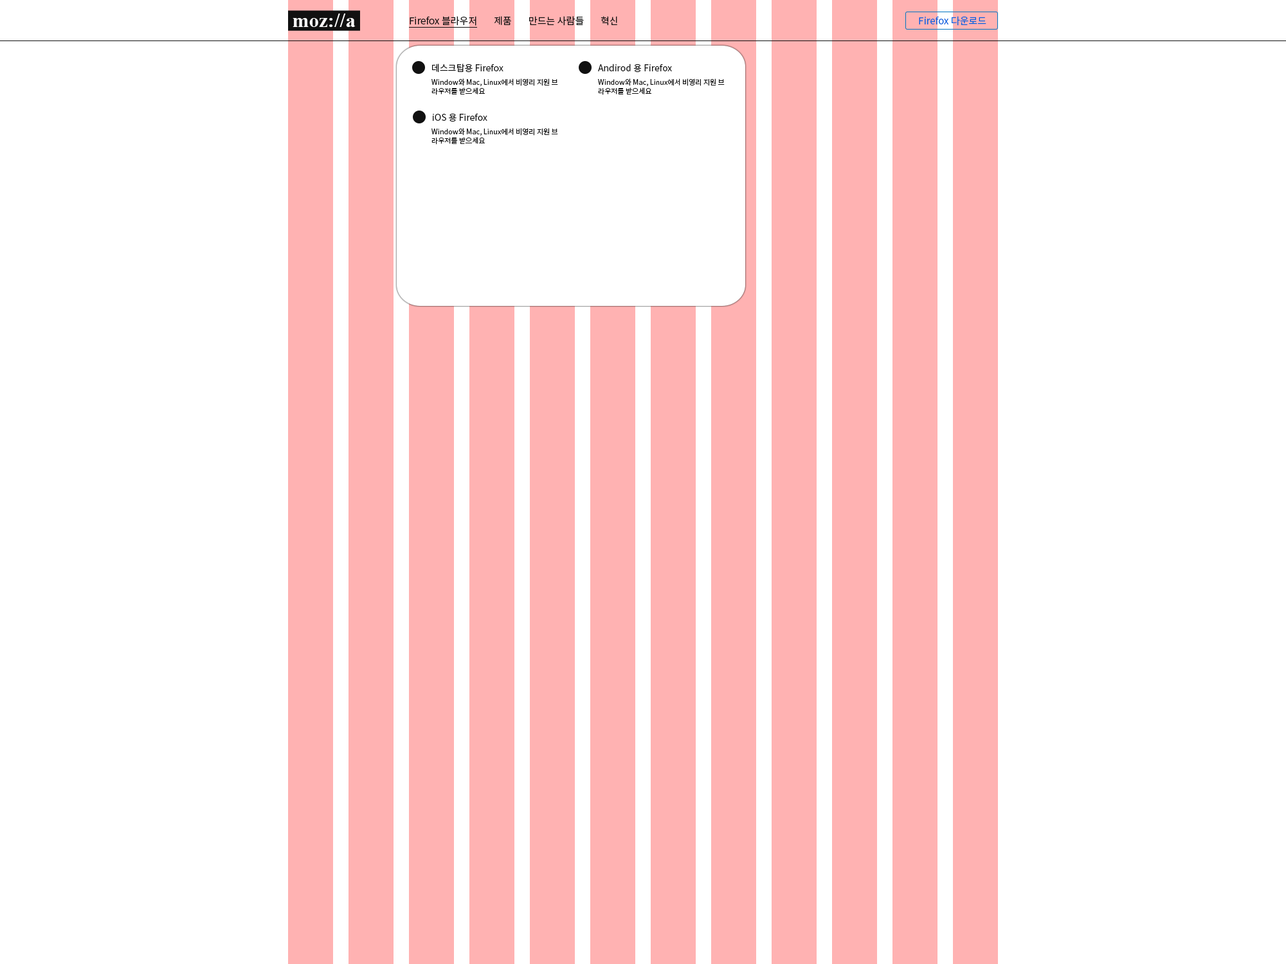
<style>
.page{position:relative;width:1286px;height:964px;background:#ffffff}
.page>*{position:absolute;margin:0}
.t1{font:9.6px "NotoSansKR-Regular";color:#111111}
.t2{font:9.6px "NotoSansKR-Regular";color:#0060df}
.t3{font:9px "NotoSansKR-Regular";color:#111111}
.t4{font:7.1px/9px "NotoSansKR-Regular";color:#111111}
</style>
<div class="page">
<p class="t1" style="left:410px;top:16px;width:66px;height:10px">Firefox 블라우저</p>
<p class="t1" style="left:494px;top:16px;width:17px;height:9px">제품</p>
<p class="t1" style="left:529px;top:16px;width:55px;height:10px">만드는 사람들</p>
<p class="t1" style="left:600px;top:16px;width:17px;height:10px">혁신</p>
<p class="t2" style="left:919px;top:16px;width:67px;height:10px">Firefox 다운로드</p>
<p class="t3" style="left:432px;top:64px;width:71px;height:9px">데스크탑용 Firefox</p>
<p class="t3" style="left:598px;top:64px;width:74px;height:9px">Andirod 용 Firefox</p>
<p class="t4" style="left:431px;top:78px;width:127px;height:17px">Window와 Mac, Linux에서 비영리 지원 브<br>라우저를 받으세요</p>
<p class="t4" style="left:598px;top:78px;width:126px;height:17px">Window와 Mac, Linux에서 비영리 지원 브<br>라우저를 받으세요</p>
<p class="t3" style="left:433px;top:113px;width:54px;height:9px">iOS 용 Firefox</p>
<p class="t4" style="left:431px;top:128px;width:127px;height:17px">Window와 Mac, Linux에서 비영리 지원 브<br>라우저를 받으세요</p>
</div>
